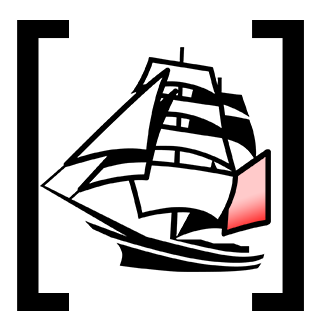
<style>
.page{position:relative;width:320px;height:320px;background:#ffffff}
.page>*{position:absolute;margin:0}
.t1{font:328.4px "AvenirNextCondensed-Regular";color:#000000}
</style>
<div class="page">
<p class="t1" style="left:17px;top:20px;width:52px;height:291px">[</p>
<p class="t1" style="left:252px;top:20px;width:52px;height:291px">]</p>
</div>
